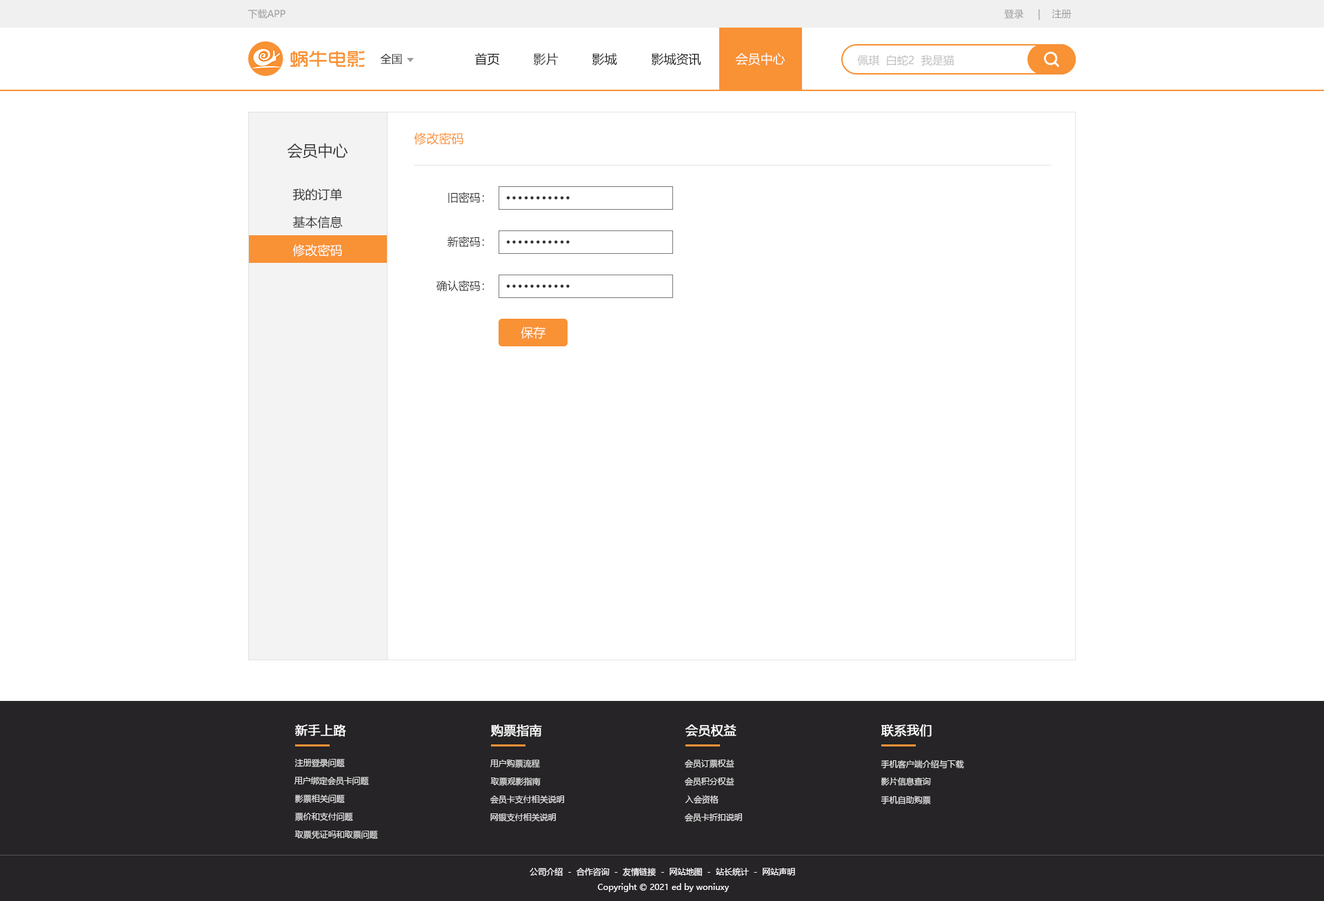
<style>
.page{position:relative;width:1324px;height:901px;background:#ffffff}
.page>*{position:absolute;margin:0}
.t1{font:9.7px "MicrosoftYaHei";color:#9a9a9a;text-transform:uppercase}
.t2{font:11px "MicrosoftYaHei";color:#313131;text-transform:uppercase}
.t3{font:12.4px "MicrosoftYaHei";color:#1b1b1b;text-transform:uppercase}
.t4{font:12.4px "MicrosoftYaHei";color:#333333;text-transform:uppercase}
.t5{font:12.4px "MicrosoftYaHei";color:#ffffff;text-transform:uppercase}
.t6{font:11px "MicrosoftYaHei";color:#bfbfbf;text-transform:uppercase}
.t7{font:12.4px "MicrosoftYaHei";color:#f99135}
.t8{font:15.2px "MicrosoftYaHei";color:#333333}
.t9{font:12.4px "MicrosoftYaHei";color:#333333}
.t10{font:11px "MicrosoftYaHei";color:#333333}
.t11{font:24.8px "MicrosoftYaHei";color:#333333}
.t12{font:12.4px "MicrosoftYaHei";color:#ffffff}
.t13{font:12.4px "MicrosoftYaHei";color:#fefefe}
.t14{font:12.4px "MicrosoftYaHei";color:#ffffff;font-weight:bold}
.t15{font:8.3px "MicrosoftYaHei";color:#e2e2e2}
.t16{font:8.3px "MicrosoftYaHei";color:#ffffff}
</style>
<div class="page">
<p class="t1" style="left:248px;top:9px;width:37px;height:10px">下载APP</p>
<p class="t1" style="left:1004px;top:9px;width:68px;height:11px">登录     |    注册</p>
<p class="t2" style="left:380px;top:54px;width:22px;height:10px">全国</p>
<p class="t3" style="left:475px;top:52px;width:24px;height:14px">首页</p>
<p class="t4" style="left:533px;top:53px;width:26px;height:13px">影片</p>
<p class="t3" style="left:592px;top:53px;width:25px;height:13px">影城</p>
<p class="t3" style="left:651px;top:53px;width:50px;height:13px">影城资讯</p>
<p class="t5" style="left:735px;top:52px;width:50px;height:14px">会员中心</p>
<p class="t6" style="left:857px;top:54px;width:97px;height:12px">佩琪  白蛇2  我是猫</p>
<p class="t7" style="left:414px;top:132px;width:49px;height:13px">修改密码</p>
<p class="t8" style="left:287px;top:143px;width:61px;height:16px">会员中心</p>
<p class="t9" style="left:292px;top:188px;width:50px;height:13px">我的订单</p>
<p class="t10" style="left:448px;top:192px;width:36px;height:11px">旧密码：</p>
<p class="t11" style="left:506px;top:196px;width:64px;height:3px">···········</p>
<p class="t9" style="left:292px;top:216px;width:51px;height:12px">基本信息</p>
<p class="t12" style="left:292px;top:244px;width:50px;height:13px">修改密码</p>
<p class="t10" style="left:448px;top:236px;width:36px;height:11px">新密码：</p>
<p class="t11" style="left:506px;top:240px;width:64px;height:3px">···········</p>
<p class="t10" style="left:436px;top:280px;width:48px;height:12px">确认密码：</p>
<p class="t11" style="left:506px;top:284px;width:64px;height:4px">···········</p>
<p class="t13" style="left:521px;top:326px;width:24px;height:13px">保存</p>
<p class="t14" style="left:295px;top:724px;width:51px;height:12px">新手上路</p>
<p class="t14" style="left:490px;top:724px;width:52px;height:12px">购票指南</p>
<p class="t14" style="left:685px;top:724px;width:51px;height:12px">会员权益</p>
<p class="t14" style="left:881px;top:724px;width:51px;height:12px">联系我们</p>
<p class="t15" style="left:294px;top:759px;width:51px;height:8px">注册登录问题</p>
<p class="t15" style="left:490px;top:759px;width:50px;height:9px">用户购票流程</p>
<p class="t15" style="left:685px;top:759px;width:49px;height:9px">会员订票权益</p>
<p class="t15" style="left:881px;top:759px;width:83px;height:9px">手机客户端介绍与下载</p>
<p class="t15" style="left:294px;top:776px;width:75px;height:9px">用户绑定会员卡问题</p>
<p class="t15" style="left:490px;top:776px;width:51px;height:9px">取票观影指南</p>
<p class="t15" style="left:685px;top:777px;width:49px;height:8px">会员积分权益</p>
<p class="t15" style="left:881px;top:776px;width:50px;height:9px">影片信息查询</p>
<p class="t15" style="left:294px;top:794px;width:51px;height:9px">影票相关问题</p>
<p class="t15" style="left:490px;top:794px;width:74px;height:9px">会员卡支付相关说明</p>
<p class="t15" style="left:685px;top:794px;width:34px;height:9px">入会资格</p>
<p class="t15" style="left:881px;top:796px;width:50px;height:8px">手机自助购票</p>
<p class="t15" style="left:295px;top:812px;width:58px;height:9px">票价和支付问题</p>
<p class="t15" style="left:490px;top:812px;width:66px;height:9px">网银支付相关说明</p>
<p class="t15" style="left:685px;top:813px;width:57px;height:8px">会员卡折扣说明</p>
<p class="t15" style="left:294px;top:830px;width:84px;height:9px">取票凭证吗和取票问题</p>
<p class="t16" style="left:530px;top:867px;width:265px;height:9px">公司介绍  -  合作咨询  -  友情链接  -  网站地图  -  站长统计  -  网站声明</p>
<p class="t16" style="left:598px;top:883px;width:131px;height:9px">Copyright © 2021 ed by woniuxy</p>
</div>
